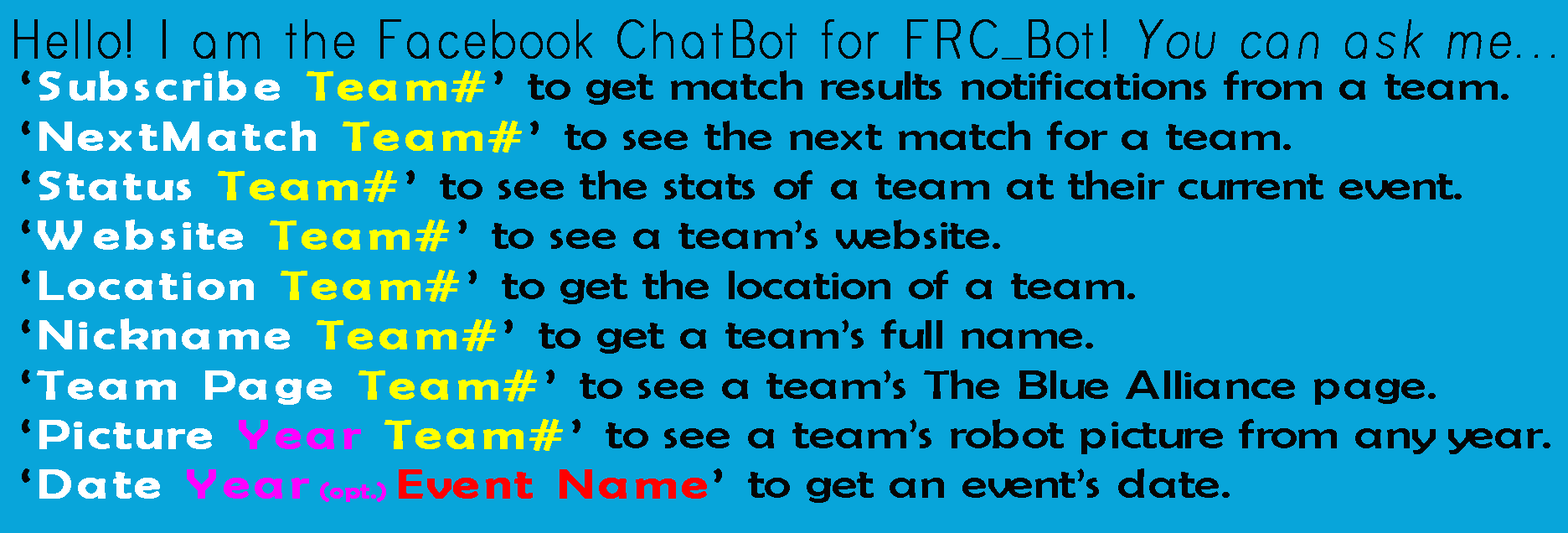
<style>
.page{position:relative;width:1568px;height:533px;background:#08a5da}
.page>*{position:absolute;margin:0}
.t1{font:56.2px "Bryant-LightAlt";color:#050505;font-weight:bold;scale:0.77 1}
.t2{font:56.2px "Bryant-LightAlt";color:#050505;font-weight:bold;font-style:italic;scale:0.77 1}
.t3{font:41.4px "BerlinSansFB-Reg";color:#050505;scale:1.25 1}
.t4{font:41.4px "BerlinSansFB-Reg";color:#050505;font-weight:bold;scale:1.25 1}
.t5{font:41.4px "BerlinSansFB-Reg";color:#ffffff;font-weight:bold;scale:1.25 1}
.t6{font:41.4px "BerlinSansFB-Reg";color:#ffff00;font-weight:bold;scale:1.25 1}
.t7{font:41.4px "BerlinSansFB-Reg";color:#ff00ff;font-weight:bold;scale:1.25 1}
.t8{font:22.2px "BerlinSansFB-Reg";color:#ff00ff;font-weight:bold;scale:1.25 1}
.t9{font:41.4px "BerlinSansFB-Reg";color:#ff0000;font-weight:bold;scale:1.25 1}
</style>
<div class="page">
<p class="t1" style="left:14px;top:19px;width:1541px;height:40px">Hello! I am the Facebook ChatBot for FRC_Bot! <span class="t2">You can ask me...</span></p>
<p class="t3" style="left:22px;top:70px;width:1528px;height:433px"><span class="t4">‘</span><span class="t5">Subscribe </span><span class="t6">Team#</span><span class="t4">’ </span>to get match results notifications from a team.<br><span class="t4">‘</span><span class="t5">NextMatch </span><span class="t6">Team#</span><span class="t4">’ </span>to see the next match for a team.<br><span class="t4">‘</span><span class="t5">Status </span><span class="t6">Team#</span><span class="t4">’ </span>to see the stats of a team at their current event.<br><span class="t4">‘</span><span class="t5">Website </span><span class="t6">Team#</span><span class="t4">’ </span>to see a team’s website.<br><span class="t4">‘</span><span class="t5">Location </span><span class="t6">Team#</span><span class="t4">’ </span>to get the location of a team.<br><span class="t4">‘</span><span class="t5">Nickname </span><span class="t6">Team#</span><span class="t4">’ </span>to get a team’s full name.<br><span class="t4">‘</span><span class="t5">Team Page </span><span class="t6">Team#</span><span class="t4">’ </span>to see a team’s The Blue Alliance page.<br><span class="t4">‘</span><span class="t5">Picture </span><span class="t7">Year </span><span class="t6">Team#</span><span class="t4">’ </span>to see a team’s robot picture from any year.<br><span class="t4">‘</span><span class="t5">Date </span><span class="t7">Year</span><span class="t8"> (opt.) </span><span class="t9">Event Name</span><span class="t4">’ </span>to get an event’s date.</p>
</div>
